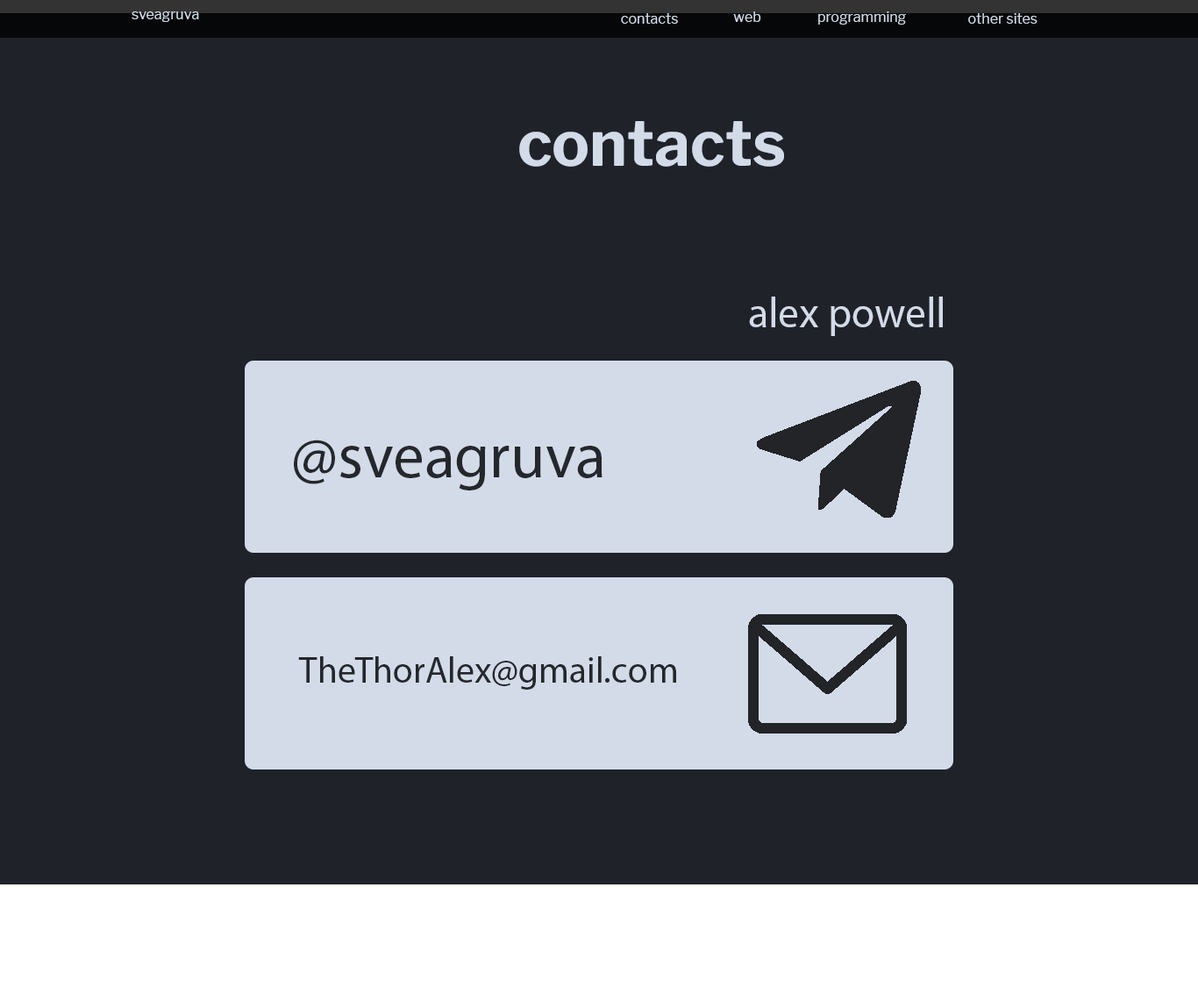
<style>
.page{position:relative;width:1198px;height:995px;background:#1f2229}
.page>*{position:absolute;margin:0}
.t1{font:14px "LibreFranklin-Regular";color:#d3dbe9}
.t2{font:63.2px "LibreFranklin-Bold";color:#d3dbe9}
.t3{font:42.1px "MyriadPro-Regular";color:#d3dbe9}
.t4{font:63.2px "MyriadPro-Regular";color:#24272b}
.t5{font:36.7px "MyriadPro-Regular";color:#24272b}
</style>
<div class="page">
<p class="t1" style="left:132px;top:11px;width:67px;height:11px">sveagruva</p>
<p class="t1" style="left:621px;top:13px;width:57px;height:11px">contacts</p>
<p class="t1" style="left:733px;top:11px;width:29px;height:11px">web</p>
<p class="t1" style="left:819px;top:11px;width:87px;height:14px">programming</p>
<p class="t1" style="left:969px;top:13px;width:69px;height:11px">other sites</p>
<p class="t2" style="left:519px;top:121px;width:265px;height:46px">contacts</p>
<p class="t3" style="left:749px;top:297px;width:194px;height:39px">alex powell</p>
<p class="t4" style="left:294px;top:440px;width:309px;height:50px">@sveagruva</p>
<p class="t5" style="left:298px;top:656px;width:378px;height:34px">TheThorAlex@gmail.com</p>
</div>
